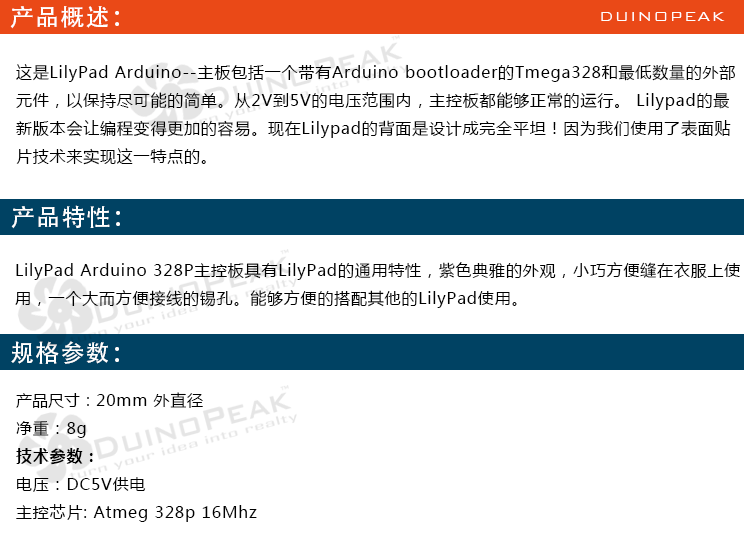
<style>
.page{position:relative;width:744px;height:539px;background:#ffffff}
.page>*{position:absolute;margin:0}
.t1{font:24px "AdobeHeitiStd-Regular";letter-spacing:0.05em;color:#ffffff}
.t2{font:18px "BankGothicBT-Light";letter-spacing:0.05em;color:#ffffff}
.t3{font:16px "MicrosoftYaHei";letter-spacing:0.05em;color:#000000}
.t4{font:16px "MicrosoftYaHei";color:#000000}
.t5{font:16px "MicrosoftYaHei-Bold";letter-spacing:0.05em;color:#000000}
</style>
<div class="page">
<p class="t1" style="left:10px;top:6px;width:109px;height:23px">产品概述：</p>
<p class="t2" style="left:601px;top:12px;width:124px;height:9px">DUINOPEAK</p>
<p class="t3" style="left:16px;top:64px;width:719px;height:101px">这是LilyPad Arduino--主板包括一个带有Arduino bootloader的Tmega328和最低数量的外部<br>元件，以保持尽可能的简单。从2V到5V的电压范围内，主控板都能够正常的运行。 Lilypad的最<br>新版本会让编程变得更加的容易。现在Lilypad的背面是设计成完全平坦！因为我们使用了表面贴<br>片技术来实现这一特点的。</p>
<p class="t1" style="left:11px;top:205px;width:109px;height:24px">产品特性：</p>
<p class="t3" style="left:15px;top:262px;width:725px;height:46px">LilyPad Arduino 328P主控板具有LilyPad的通用特性，紫色典雅的外观，小巧方便缝在衣服上使<br>用，一个大而方便接线的锡孔。能够方便的搭配其他的LilyPad使用。</p>
<p class="t1" style="left:11px;top:341px;width:108px;height:23px">规格参数：</p>
<p class="t3" style="left:16px;top:392px;width:241px;height:130px"><span class="t4">产品尺寸：</span>20mm 外直径<br>净重：8g<br><span class="t5">技术参数：<br></span>电压：DC5V供电<br>主控芯片: Atmeg 328p 16Mhz</p>
</div>
